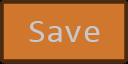
<style>
.page{position:relative;width:128px;height:64px;background:#cf782d}
.page>*{position:absolute;margin:0}
.t1{font:33.3px "Consolas";color:#c8c8c8}
</style>
<div class="page">
<p class="t1" style="left:29px;top:21px;width:71px;height:21px">Save</p>
</div>
